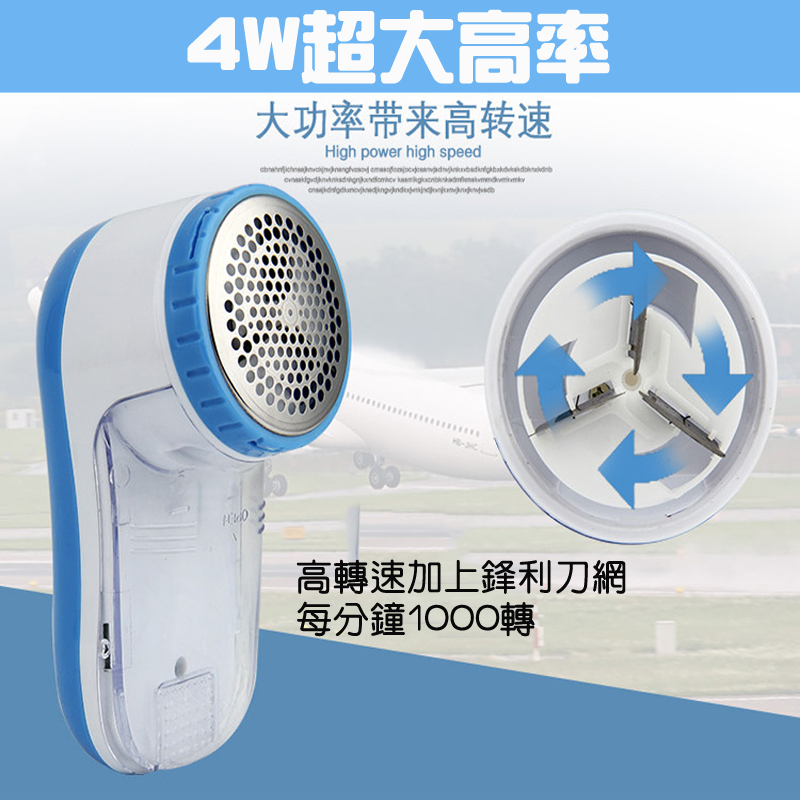
<style>
.page{position:relative;width:800px;height:800px}
.page>*{position:absolute;margin:0}
.t1{font:76px "HanWangZonYi";color:#fbfbfb;font-weight:bold}
.t2{font:36px "HanWangYenLight";color:#080808;font-weight:bold}
</style>
<div class="page">
<p class="t1" style="left:187px;top:9px;width:423px;height:75px">4W超大高率</p>
<p class="t2" style="left:296px;top:559px;width:330px;height:78px">高轉速加上鋒利刀網<br>每分鐘1000轉</p>
</div>
